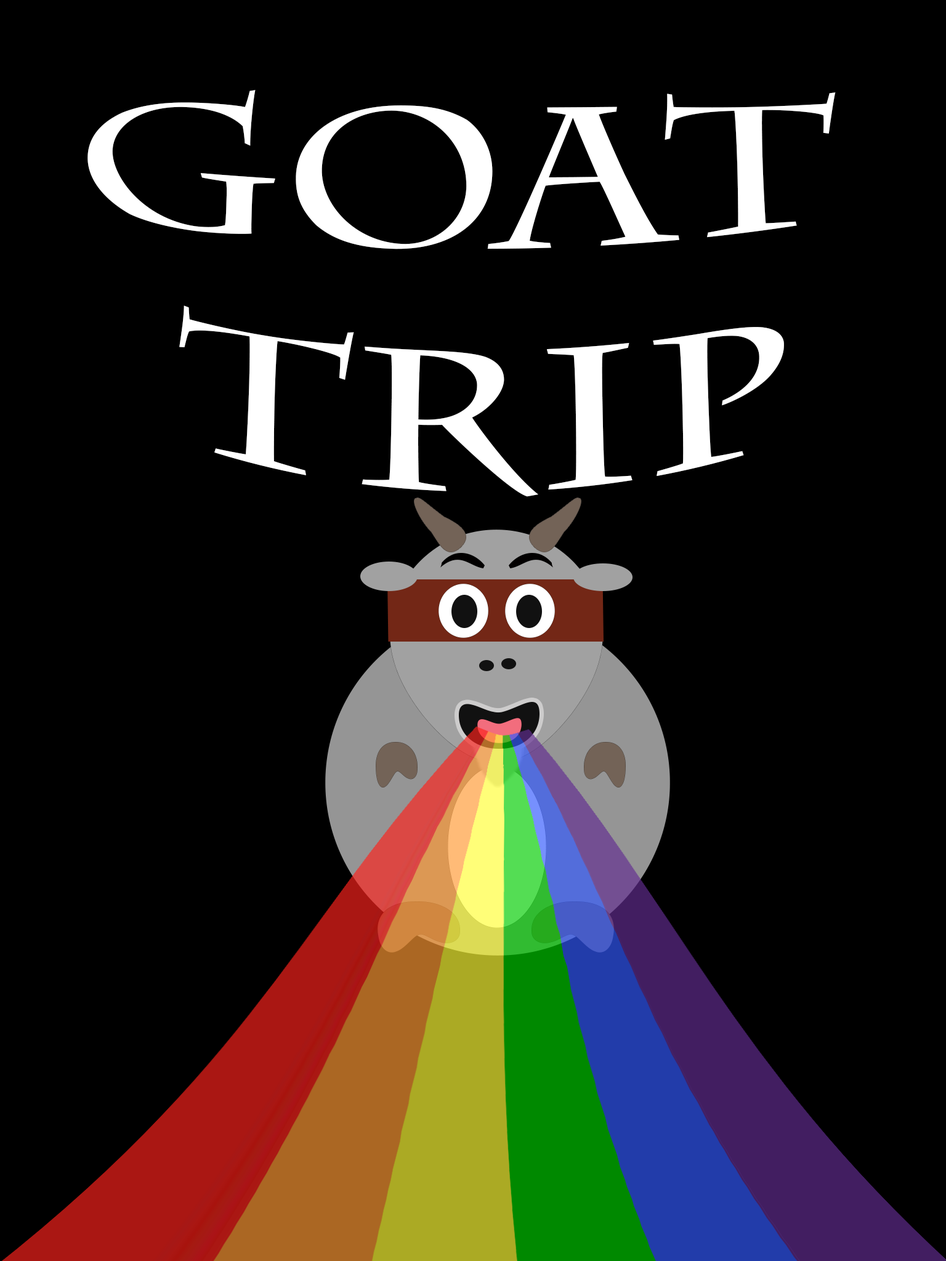
<style>
.page{position:relative;width:946px;height:1261px;background:#000000}
.page>*{position:absolute;margin:0}
.t1{font:153.7px "CharlemagneStd-Bold";color:#ffffff;scale:1.51 1}
</style>
<div class="page">
<p class="t1" style="left:87px;top:90px;width:748px;height:407px;text-align:center">Goat <br>Trip</p>
</div>
